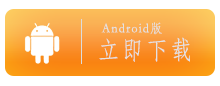
<style>
.page{position:relative;width:220px;height:86px;background:#ffffff}
.page>*{position:absolute;margin:0}
.t1{font:13.1px/16.6px "STFangsong";letter-spacing:0.1em;color:#e3e2e2;scale:0.93 1}
.t2{font:25.5px "STFangsong";letter-spacing:0.1em;color:#e3e2e2;scale:0.86 1}
</style>
<div class="page">
<p class="t1" style="left:99px;top:22px;width:91px;height:40px">Android版<br><span class="t2">立即下载</span></p>
</div>
